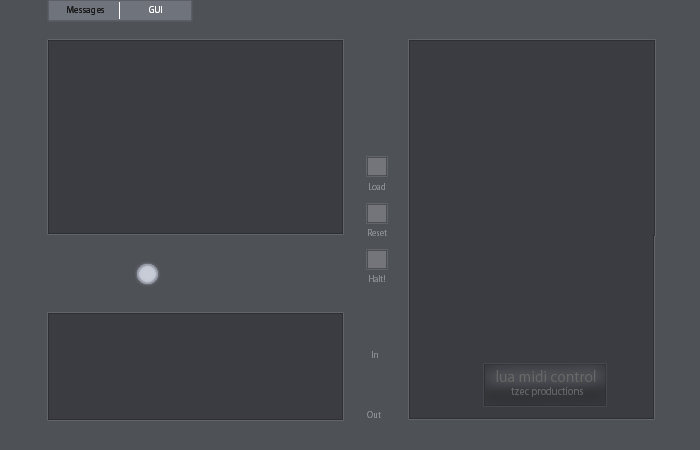
<style>
.page{position:relative;width:700px;height:450px;background:#3a3c41}
.page>*{position:absolute;margin:0}
.t1{font:9.9px "Myriad-Roman";color:#1a1a1a;scale:0.96 1}
.t2{font:9.9px "Myriad-Roman";color:#ffffff;scale:0.96 1}
.t3{font:9px "Myriad-Roman";color:#8b8c90;scale:0.96 1}
.t4{font:16.2px "Myriad-Roman";color:#6a6867;scale:0.96 1}
.t5{font:10.8px "Myriad-Roman";color:#626467;scale:0.96 1}
</style>
<div class="page">
<p class="t1" style="left:67px;top:6px;width:37px;height:9px">Messages</p>
<p class="t2" style="left:149px;top:6px;width:13px;height:7px">GUI</p>
<p class="t3" style="left:369px;top:183px;width:16px;height:7px">Load</p>
<p class="t3" style="left:368px;top:229px;width:19px;height:7px">Reset</p>
<p class="t3" style="left:369px;top:275px;width:16px;height:7px">Halt!</p>
<p class="t3" style="left:372px;top:351px;width:6px;height:7px">In</p>
<p class="t4" style="left:496px;top:370px;width:100px;height:12px">lua midi control</p>
<p class="t5" style="left:511px;top:387px;width:72px;height:10px">tzec productions</p>
<p class="t3" style="left:367px;top:411px;width:14px;height:7px">Out</p>
</div>
